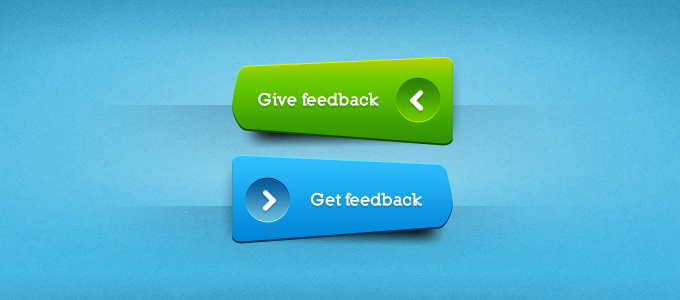
<style>
.page{position:relative;width:680px;height:300px}
.page>*{position:absolute;margin:0}
.t1{font:16.8px "Nilland-Black";color:#ffffff}
</style>
<div class="page">
<p class="t1" style="left:258px;top:92px;width:121px;height:14px">Give feedback</p>
<p class="t1" style="left:310px;top:192px;width:112px;height:14px">Get feedback</p>
</div>
